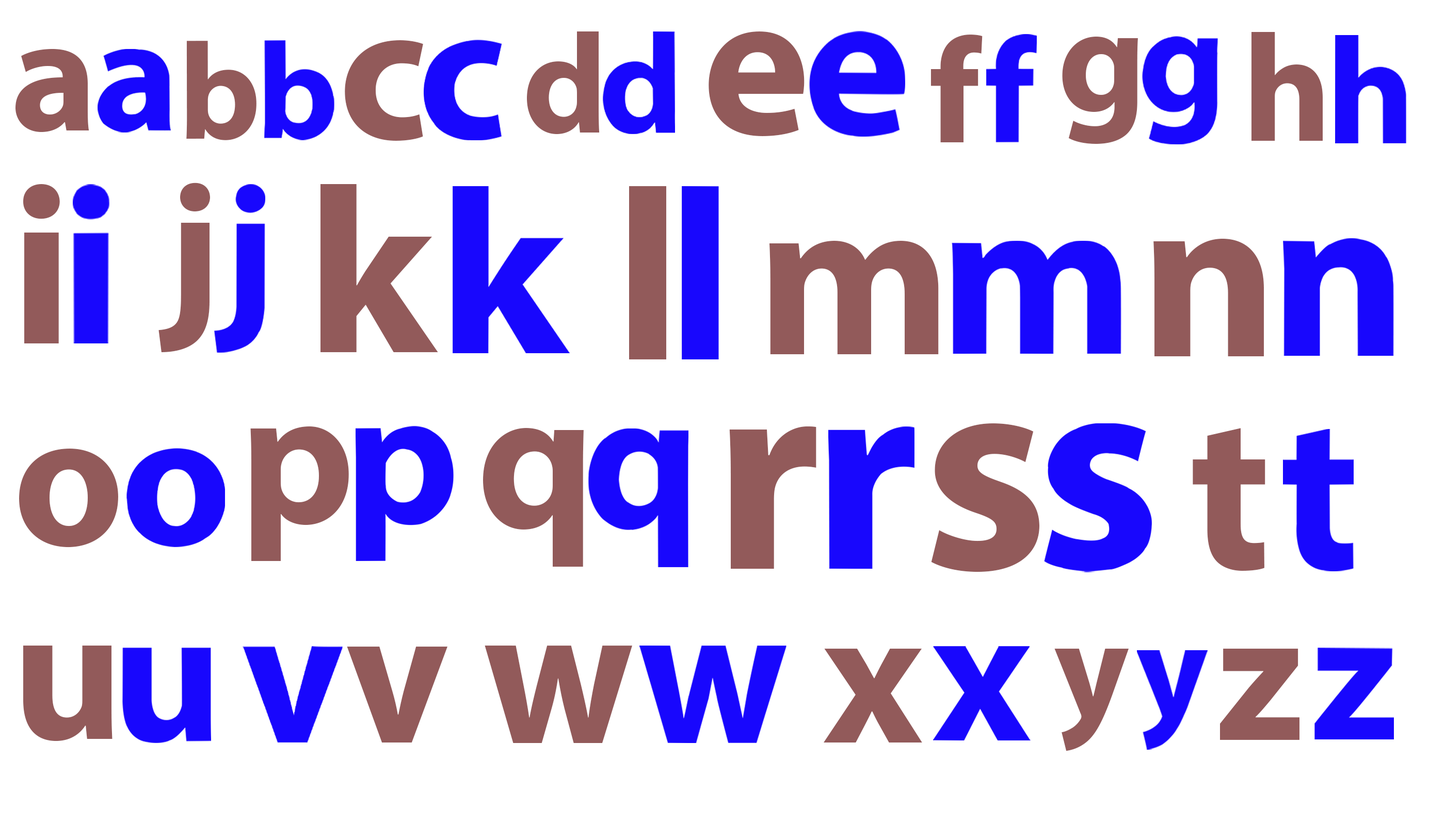
<style>
.page{position:relative;width:1445px;height:825px;background:#ffffff}
.page>*{position:absolute;margin:0}
.t1{font:137.8px "MyriadPro-Bold";color:#925a5a}
.t2{font:197.4px "MyriadPro-Bold";color:#925a5a}
.t3{font:142.6px "MyriadPro-Bold";color:#925a5a}
.t4{font:205.7px "MyriadPro-Bold";color:#925a5a}
.t5{font:149.8px "MyriadPro-Bold";color:#925a5a}
.t6{font:152.3px "MyriadPro-Bold";color:#925a5a}
.t7{font:153.3px "MyriadPro-Bold";color:#925a5a}
.t8{font:163.5px "MyriadPro-Bold";color:#925a5a}
.t9{font:226.9px "MyriadPro-Bold";color:#925a5a}
.t10{font:186.2px "MyriadPro-Bold";color:#925a5a}
.t11{font:236.6px "MyriadPro-Bold";color:#925a5a}
.t12{font:227.4px "MyriadPro-Bold";color:#925a5a}
.t13{font:235.8px "MyriadPro-Bold";color:#925a5a}
.t14{font:291.6px "MyriadPro-Bold";color:#925a5a}
.t15{font:193.6px "MyriadPro-Bold";color:#925a5a}
.t16{font:199.3px "MyriadPro-Bold";color:#925a5a}
.t17{font:284.5px "MyriadPro-Bold";color:#925a5a}
.t18{font:223.7px "MyriadPro-Bold";color:#925a5a}
.t19{font:193.5px "MyriadPro-Bold";color:#925a5a}
.t20{font:190.7px "MyriadPro-Bold";color:#925a5a}
.t21{font:195.9px "MyriadPro-Bold";color:#925a5a}
.t22{font:199.7px "MyriadPro-Bold";color:#925a5a}
.t23{font:192.1px "MyriadPro-Bold";color:#925a5a}
.t24{font:144px "MyriadPro-Bold";color:#925a5a}
.t25{font:187px "MyriadPro-Bold";color:#925a5a}
</style>
<div class="page">
<p class="t1" style="left:186px;top:41px;width:70px;height:99px">b</p>
<p class="t2" style="left:345px;top:40px;width:78px;height:101px">c</p>
<p class="t3" style="left:527px;top:31px;width:72px;height:104px">d</p>
<p class="t4" style="left:708px;top:31px;width:96px;height:105px">e</p>
<p class="t5" style="left:930px;top:35px;width:52px;height:107px">f</p>
<p class="t6" style="left:1062px;top:37px;width:76px;height:107px">g</p>
<p class="t7" style="left:1251px;top:32px;width:71px;height:109px">h</p>
<p class="t8" style="left:15px;top:49px;width:74px;height:84px">a</p>
<p class="t9" style="left:23px;top:184px;width:37px;height:160px">i</p>
<p class="t10" style="left:158px;top:183px;width:52px;height:169px">j</p>
<p class="t11" style="left:320px;top:184px;width:118px;height:168px">k</p>
<p class="t12" style="left:769px;top:241px;width:169px;height:113px">m</p>
<p class="t13" style="left:1153px;top:238px;width:110px;height:118px">n</p>
<p class="t14" style="left:931px;top:424px;width:108px;height:149px">s</p>
<p class="t15" style="left:250px;top:426px;width:99px;height:135px">p</p>
<p class="t16" style="left:483px;top:428px;width:100px;height:139px">q</p>
<p class="t17" style="left:729px;top:427px;width:87px;height:142px">r</p>
<p class="t18" style="left:1192px;top:428px;width:73px;height:143px">t</p>
<p class="t19" style="left:19px;top:449px;width:99px;height:99px">o</p>
<p class="t20" style="left:23px;top:646px;width:89px;height:95px">u</p>
<p class="t21" style="left:347px;top:647px;width:100px;height:96px">v</p>
<p class="t22" style="left:484px;top:646px;width:148px;height:97px">w</p>
<p class="t23" style="left:823px;top:649px;width:99px;height:94px">x</p>
<p class="t24" style="left:1054px;top:649px;width:74px;height:103px">y</p>
<p class="t25" style="left:1220px;top:649px;width:79px;height:91px">z</p>
</div>
